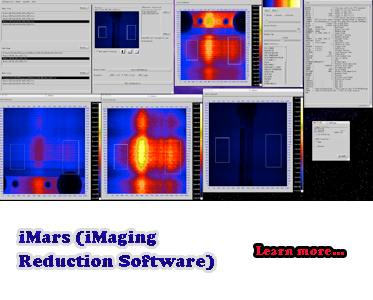
<style>
.page{position:relative;width:373px;height:300px;background:#ffffff}
.page>*{position:absolute;margin:0}
.t1{font:18px/24px "CooperBlack";color:#180794}
.t2{font:13px "CooperBlack";color:#fa0a2c}
</style>
<div class="page">
<p class="t1" style="left:19px;top:231px;width:195px;height:39px">iMars (iMaging<br>Reduction Software)</p>
<p class="t2" style="left:256px;top:246px;width:88px;height:9px">Learn more...</p>
</div>
